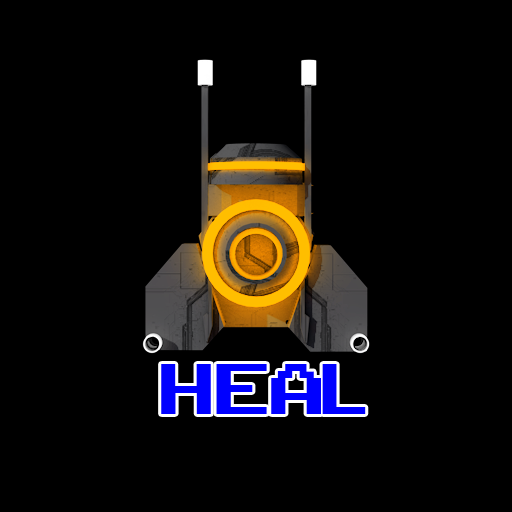
<style>
.page{position:relative;width:512px;height:512px;background:#000000}
.page>*{position:absolute;margin:0}
.t1{font:100px "ArcadeClassic";color:#0000ff}
</style>
<div class="page">
<p class="t1" style="left:161px;top:364px;width:205px;height:50px">Heal</p>
</div>
